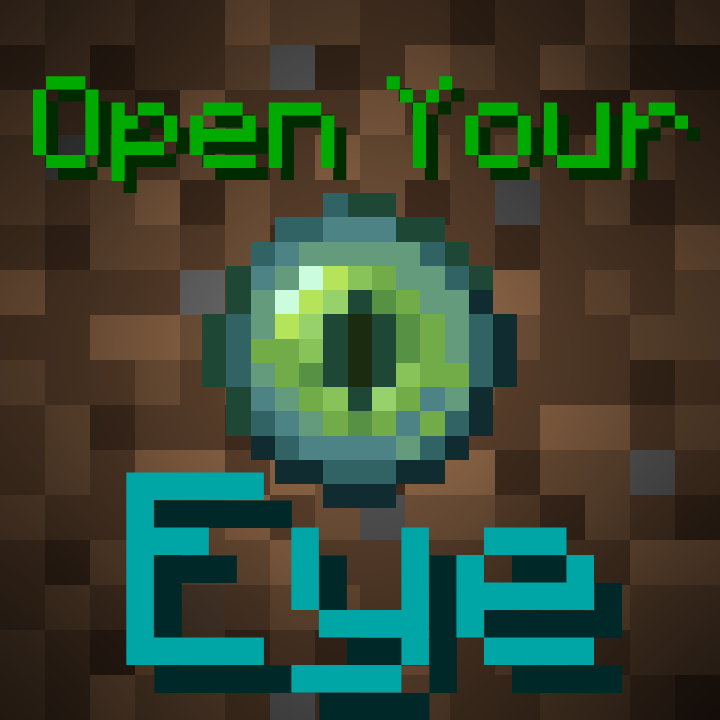
<style>
.page{position:relative;width:720px;height:720px}
.page>*{position:absolute;margin:0}
.t1{font:131px "MinecraftSeven";color:#00aa00}
.t2{font:275.1px "MinecraftSeven";color:#00a6a6}
</style>
<div class="page">
<p class="t1" style="left:32px;top:76px;width:656px;height:106px">Open Your</p>
<p class="t2" style="left:126px;top:472px;width:469px;height:221px">Eye</p>
</div>
